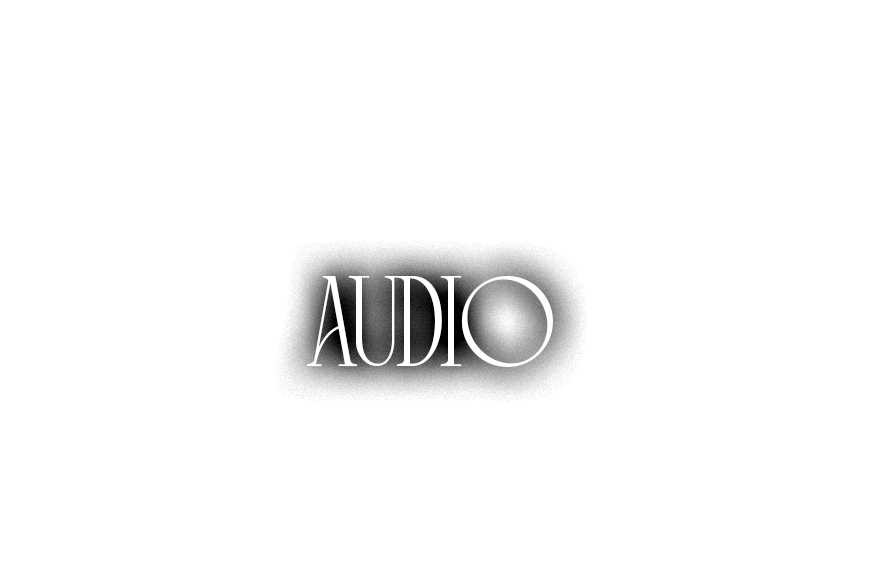
<style>
.page{position:relative;width:886px;height:580px;background:#ffffff}
.page>*{position:absolute;margin:0}
.t1{font:125px "Cyrano-DEMO";color:#ffffff}
</style>
<div class="page">
<p class="t1" style="left:307px;top:275px;width:246px;height:92px">audio</p>
</div>
